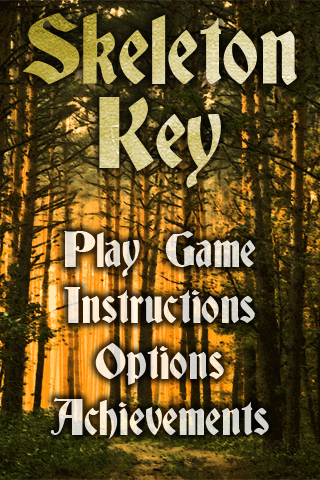
<style>
.page{position:relative;width:320px;height:480px}
.page>*{position:absolute;margin:0}
.t1{font:91px/84px "Deutsch-Gothic"}
.t2{font:46px/56px "Deutsch-Gothic"}
</style>
<div class="page">
<p class="t1" style="left:23px;top:13px;width:274px;height:175px;text-align:center">Skeleton<br>Key</p>
<p class="t2" style="left:50px;top:231px;width:219px;height:208px;text-align:center">Play Game<br>Instructions<br>Options<br>Achievements</p>
</div>
